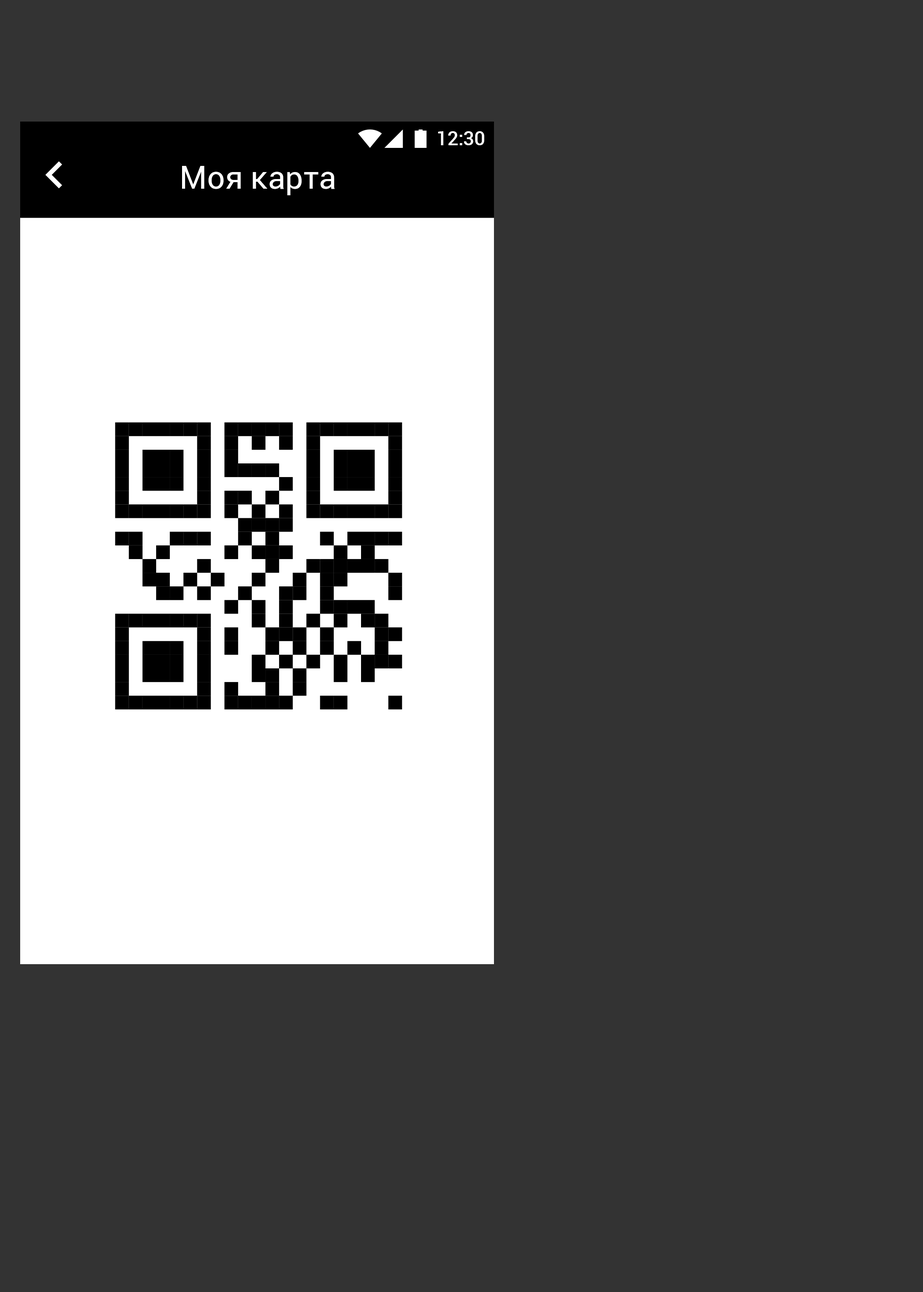
<style>
.page{position:relative;width:923px;height:1292px;background:#333333}
.page>*{position:absolute;margin:0}
.t1{font:19.3px "Roboto-Medium";color:#ffffff}
.t2{font:31.6px "Roboto-Regular";color:#ffffff}
</style>
<div class="page">
<p class="t1" style="left:438px;top:131px;width:46px;height:14px">12:30</p>
<p class="t2" style="left:182px;top:166px;width:153px;height:29px">Моя карта</p>
</div>
